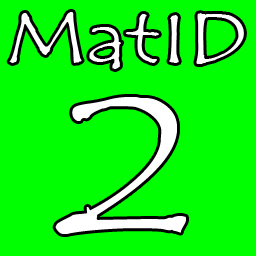
<style>
.page{position:relative;width:256px;height:256px;background:#00ff00}
.page>*{position:absolute;margin:0}
.t1{font:70.8px/170px "TempusSansITC";color:#ffffff;scale:1.31 1}
.t2{font:200px/170px "TempusSansITC";color:#ffffff;scale:1.31 1}
</style>
<div class="page">
<p class="t1" style="left:9px;top:12px;width:235px;height:222px;text-align:center">MatID<br><span class="t2">2</span></p>
</div>
